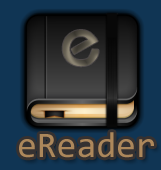
<style>
.page{position:relative;width:161px;height:170px;background:#103554}
.page>*{position:absolute;margin:0}
.t1{font:72px "ZhunYuan"}
.t2{font:36px "Consolas";color:#ac875b}
</style>
<div class="page">
<p class="t1" style="left:62px;top:30px;width:37px;height:37px">e</p>
<p class="t2" style="left:19px;top:132px;width:135px;height:26px">eReader</p>
</div>
